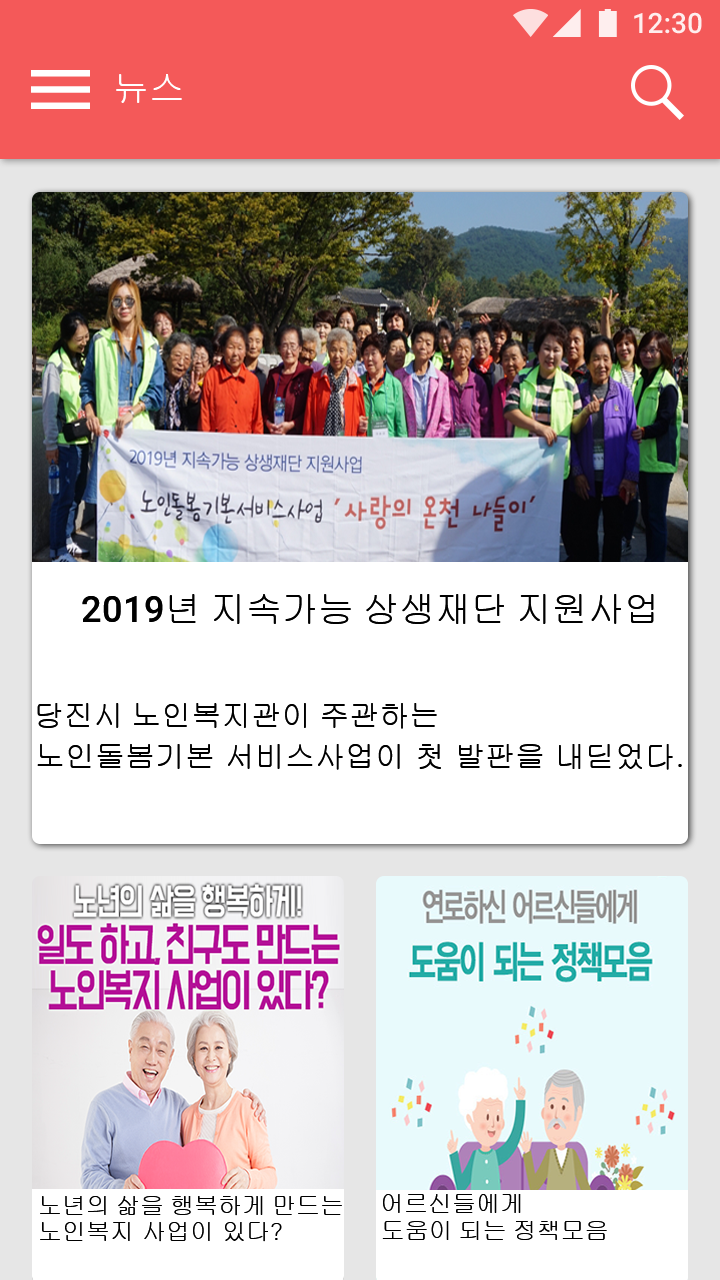
<style>
.page{position:relative;width:720px;height:1280px;background:#ffffff}
.page>*{position:absolute;margin:0}
.t1{font:36px "Gulim";color:#ffffff}
.t2{font:36px "Gulim";color:#000000}
.t3{font:36px "Roboto-Medium";color:#000000}
.t4{font:30px "Gulim";color:#000000}
.t5{font:24px "Gulim";color:#000000}
</style>
<div class="page">
<p class="t1" style="left:116px;top:74px;width:66px;height:29px">뉴스</p>
<p class="t2" style="left:82px;top:594px;width:572px;height:30px"><span class="t3">2019</span>년 지속가능 상생재단 지원사업</p>
<p class="t4" style="left:37px;top:703px;width:400px;height:26px">당진시 노인복지관이 주관하는 <span class="t5">노인돌봄서비스사업</span></p>
<p class="t4" style="left:37px;top:744px;width:645px;height:26px">노인돌봄기본 서비스사업이 첫 발판을 내딛었다.</p>
<p class="t5" style="left:40px;top:1196px;width:302px;height:20px">노년의 삶을 행복하게 만드는</p>
<p class="t5" style="left:383px;top:1194px;width:138px;height:19px">어르신들에게</p>
<p class="t5" style="left:40px;top:1222px;width:242px;height:20px">노인복지 사업이 있다?</p>
<p class="t5" style="left:382px;top:1221px;width:225px;height:19px">도움이 되는 정책모음</p>
</div>
